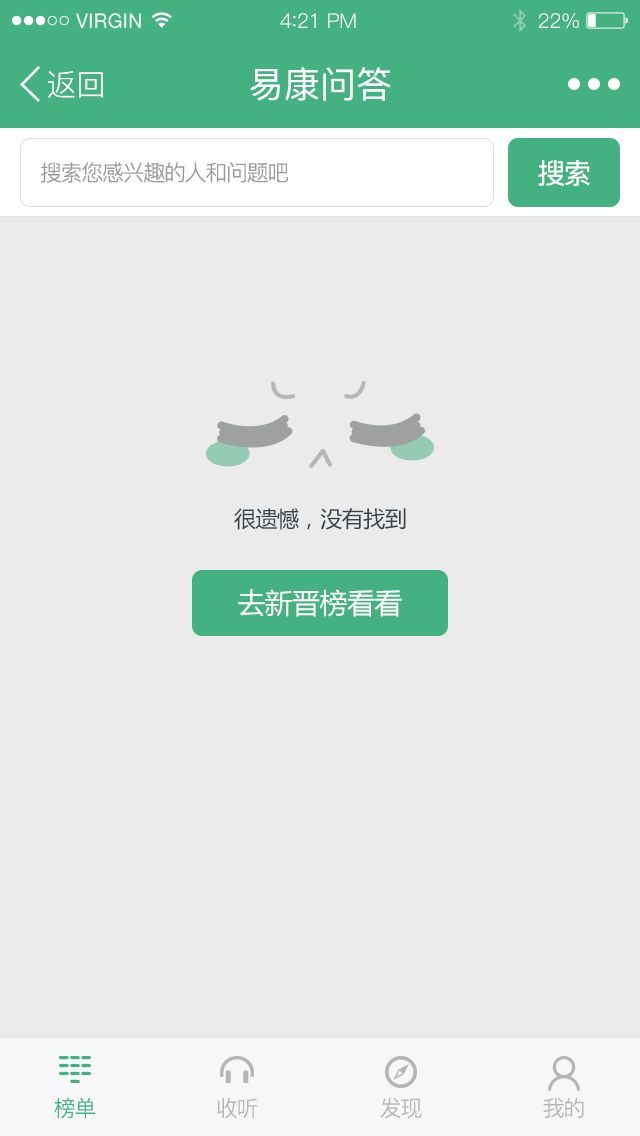
<style>
.page{position:relative;width:640px;height:1136px;background:#ebebeb}
.page>*{position:absolute;margin:0}
.t1{font:19.6px "HelveticaNeue";letter-spacing:0.02em;color:#ffffff}
.t2{font:20.4px "PingFang-SC-Regular";letter-spacing:-0.02em;color:#ffffff}
.t3{font:22.1px "PingFang-SC-Regular";letter-spacing:-0.02em;color:#ffffff}
.t4{font:30px "PingFang-SC-Regular";color:#ffffff}
.t5{font:36px "PingFang-SC-Medium";color:#ffffff}
.t6{font:28px "PingFang-SC-Medium";letter-spacing:-0.06em;color:#ffffff}
.t7{font:22px "PingFang-SC-Regular";letter-spacing:-0.06em;color:#999999}
.t8{font:22px "MicrosoftYaHei";letter-spacing:-0.02em;color:#35424b}
.t9{font:28px "MicrosoftYaHei";letter-spacing:-0.02em;color:#ffffff}
.t10{font:22px "PingFang-SC-Regular";letter-spacing:-0.06em;color:#44b181}
.t11{font:22px "PingFang-SC-Regular";letter-spacing:-0.06em;color:#b4b5b6}
</style>
<div class="page">
<p class="t1" style="left:76px;top:13px;width:65px;height:16px">VIRGIN</p>
<p class="t2" style="left:280px;top:13px;width:76px;height:15px">4<span class="t3">:</span>21 PM</p>
<p class="t2" style="left:539px;top:13px;width:40px;height:16px">22%</p>
<p class="t4" style="left:48px;top:71px;width:55px;height:27px">返回</p>
<p class="t5" style="left:250px;top:67px;width:141px;height:34px">易康问答</p>
<p class="t6" style="left:538px;top:160px;width:52px;height:26px">搜索</p>
<p class="t7" style="left:40px;top:162px;width:249px;height:21px">搜索您感兴趣的人和问题吧</p>
<p class="t8" style="left:234px;top:508px;width:172px;height:22px">很遗憾，没有找到</p>
<p class="t9" style="left:238px;top:589px;width:164px;height:28px">去新晋榜看看</p>
<p class="t10" style="left:54px;top:1097px;width:42px;height:22px">榜单</p>
<p class="t11" style="left:380px;top:1097px;width:42px;height:22px">发现</p>
<p class="t11" style="left:543px;top:1097px;width:41px;height:21px">我的</p>
<p class="t11" style="left:217px;top:1098px;width:41px;height:21px">收听</p>
</div>
